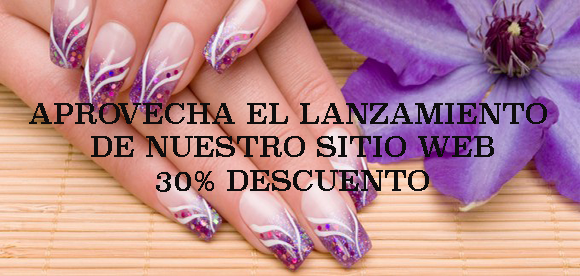
<style>
.page{position:relative;width:580px;height:276px}
.page>*{position:absolute;margin:0}
.t1{font:28px "Superclarendon-Regular";color:#0e0d0d}
</style>
<div class="page">
<p class="t1" style="left:29px;top:103px;width:518px;height:89px;text-align:center">APROVECHA EL LANZAMIENTO <br>DE NUESTRO SITIO WEB<br>30% DESCUENTO</p>
</div>
